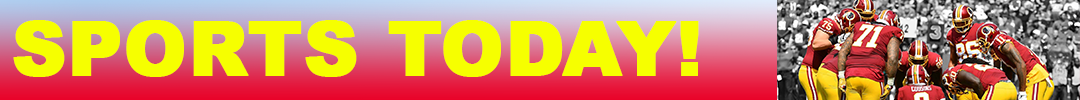
<style>
.page{position:relative;width:1080px;height:100px;background:#f6ff00}
.page>*{position:absolute;margin:0}
.t1{font:75px "Arial-Black";color:#f6ff00;font-weight:bold}
</style>
<div class="page">
<p class="t1" style="left:13px;top:20px;width:686px;height:57px">SPORTS TODAY!</p>
</div>
